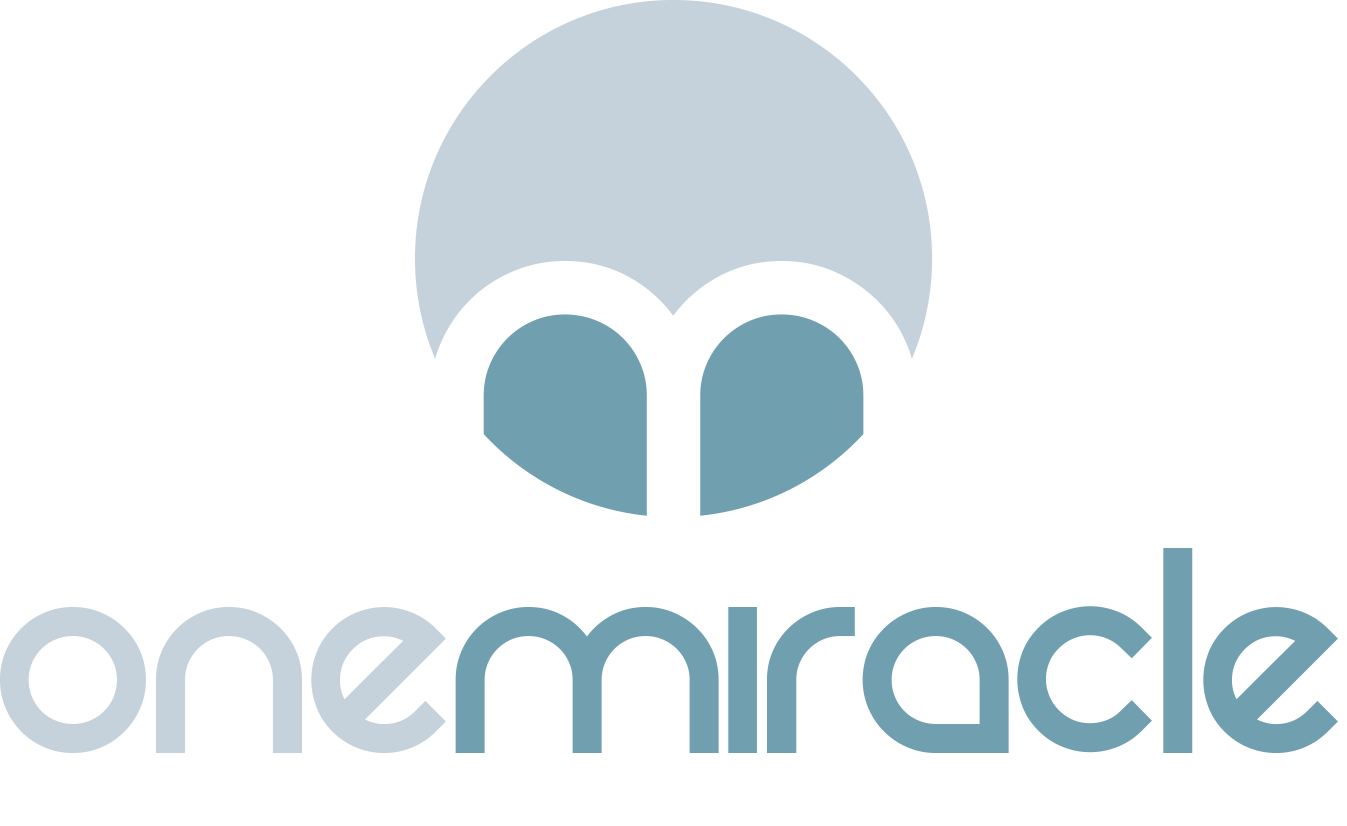
<style>
.page{position:relative;width:1347px;height:826px;background:#ffffff}
.page>*{position:absolute;margin:0}
.t1{font:324.7px "REZ";color:#709fb0}
.t2{font:324.7px "REZ";color:#c5d2db}
</style>
<div class="page">
<p class="t1" style="left:0px;top:548px;width:1338px;height:205px"><span class="t2">One</span>Miracle</p>
</div>
